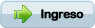
<style>
.page{position:relative;width:95px;height:28px;background:#b7cdda}
.page>*{position:absolute;margin:0}
.t1{font:12px "ArialRoundedMTBold";letter-spacing:-0.05em;color:#000000;font-weight:bold}
</style>
<div class="page">
<p class="t1" style="left:41px;top:9px;width:43px;height:12px">Ingreso</p>
</div>
